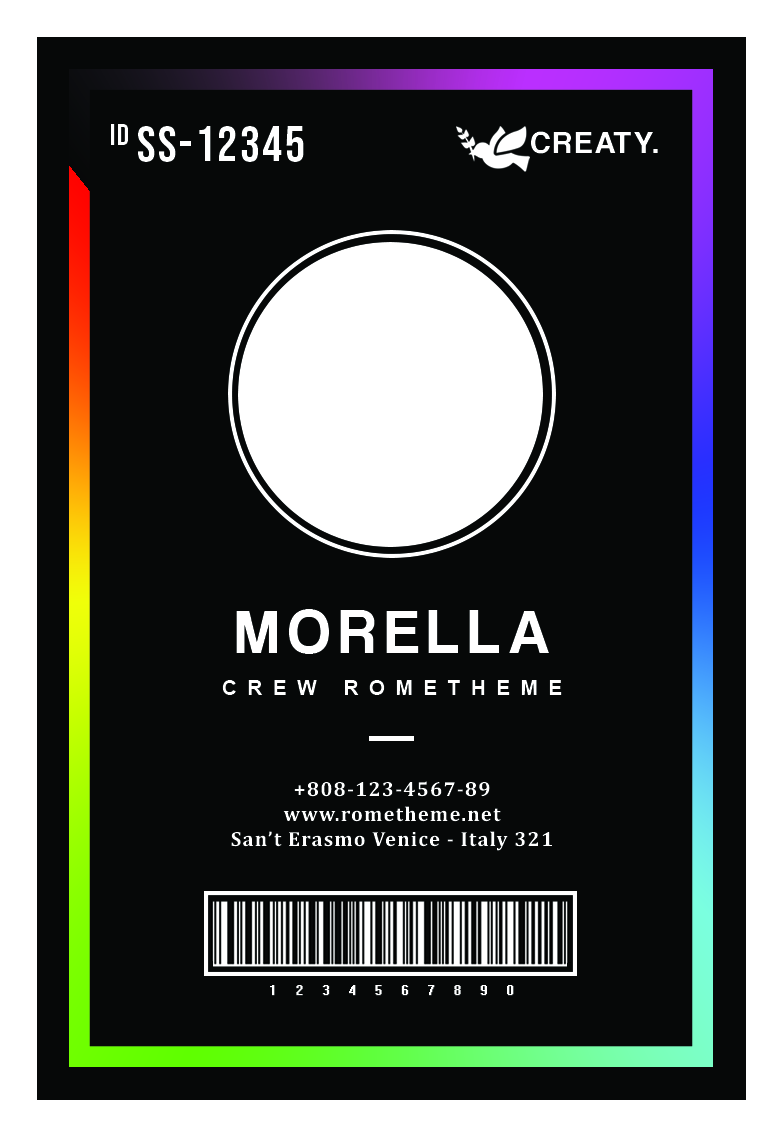
<style>
.page{position:relative;width:784px;height:1138px;background:#060808}
.page>*{position:absolute;margin:0}
.t1{font:50px "BebasNeue-Regular";letter-spacing:0.05em;color:#ffffff}
.t2{font:31.3px "CoolveticaRg-Regular";letter-spacing:0.1em;color:#ffffff}
.t3{font:62.6px "CoolveticaRg-Regular";letter-spacing:0.15em;color:#ffffff}
.t4{font:20.9px "Arial-BoldMT";letter-spacing:0.5em;color:#ffffff}
.t5{font:20.9px "Cambria-Bold";letter-spacing:0.05em;color:#ffffff}
.t6{font:14.4px "System";letter-spacing:1.2em;color:#ffffff;font-weight:bold}
</style>
<div class="page">
<p class="t1" style="left:111px;top:124px;width:193px;height:38px">ID SS-12345</p>
<p class="t2" style="left:531px;top:131px;width:127px;height:23px">CREATY.</p>
<p class="t3" style="left:236px;top:609px;width:313px;height:45px">MORELLA</p>
<p class="t4" style="left:222px;top:680px;width:340px;height:15px">CREW ROMETHEME</p>
<p class="t5" style="left:231px;top:781px;width:321px;height:70px;text-align:center">+808-123-4567-89<br>www.rometheme.net<br>San’t Erasmo Venice - Italy 321</p>
<p class="t6" style="left:270px;top:985px;width:244px;height:11px">1234567890</p>
</div>
